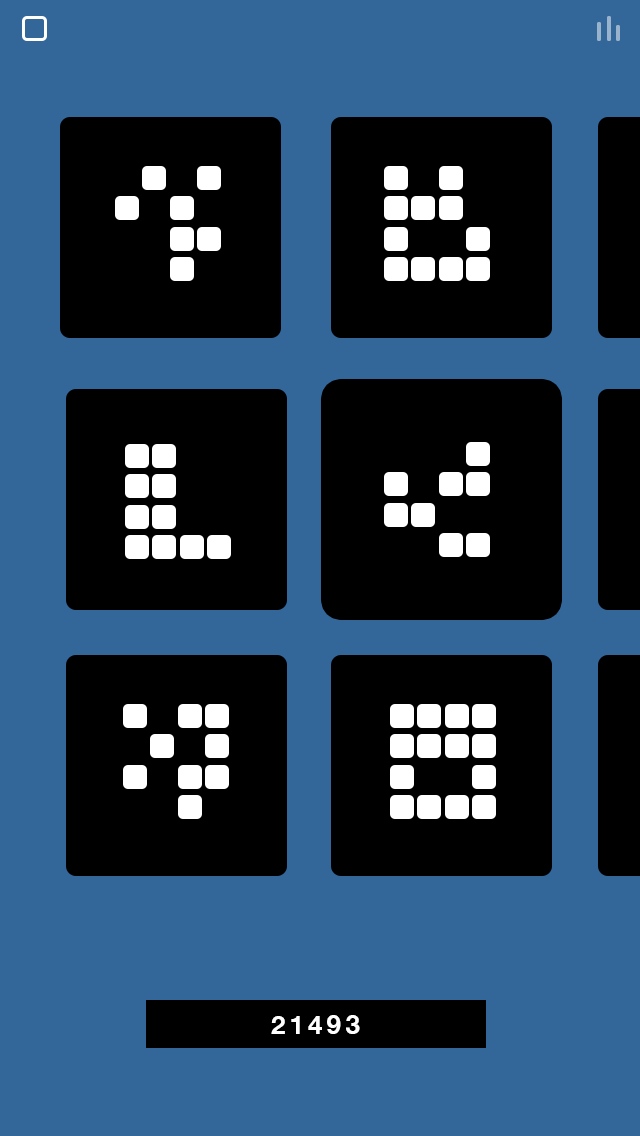
<style>
.page{position:relative;width:640px;height:1136px;background:#336699}
.page>*{position:absolute;margin:0}
.t1{font:26px "HelveticaNeue-Bold";letter-spacing:0.16em;color:#ffffff}
</style>
<div class="page">
<p class="t1" style="left:271px;top:1015px;width:89px;height:19px">21493</p>
</div>
